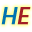
<style>
.page{position:relative;width:32px;height:32px;background:#ffffff}
.page>*{position:absolute;margin:0}
.t1{font:24px "MyriadPro-Regular";color:#0073b1;font-weight:bold;font-style:italic}
.t2{font:24px "MyriadPro-Regular";color:#a11d24;font-weight:bold;font-style:italic}
</style>
<div class="page">
<p class="t1" style="left:1px;top:7px;width:30px;height:18px">H<span class="t2">E</span></p>
</div>
